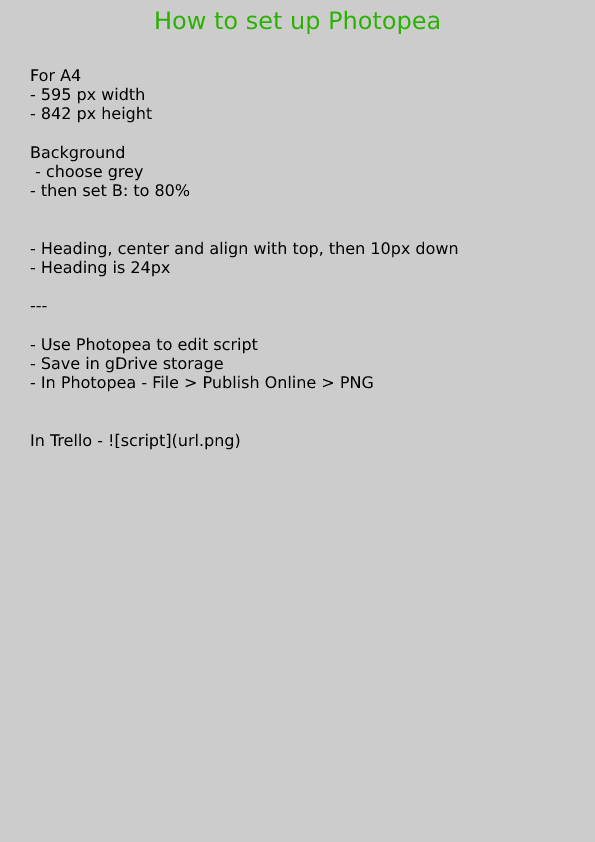
<style>
.page{position:relative;width:595px;height:842px;background:#cccccc}
.page>*{position:absolute;margin:0}
.t1{font:24px "DejaVuSans";color:#2ab200}
.t2{font:16px "DejaVuSans";color:#000000}
</style>
<div class="page">
<p class="t1" style="left:156px;top:10px;width:284px;height:24px">How to set up Photopea</p>
<p class="t2" style="left:30px;top:69px;width:428px;height:381px">For A4<br>- 595 px width<br>- 842 px height<br><br>Background<br> - choose grey<br>- then set B: to 80%<br><br><br>- Heading, center and align with top, then 10px down<br>- Heading is 24px<br><br>---<br><br>- Use Photopea to edit script<br>- Save in gDrive storage<br>- In Photopea - File &gt; Publish Online &gt; PNG<br><br><br>In Trello - ![script](url.png)</p>
</div>
